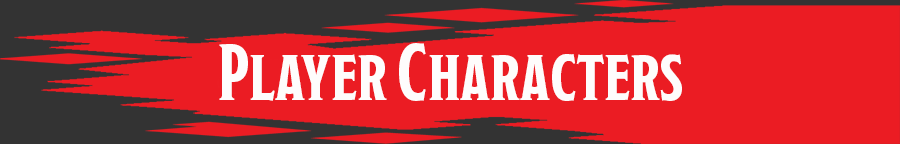
<style>
.page{position:relative;width:900px;height:144px;background:#eb1c23}
.page>*{position:absolute;margin:0}
.t1{font:80px "ModestoCondensed-Bold";color:#fefcfc}
</style>
<div class="page">
<p class="t1" style="left:219px;top:43px;width:463px;height:58px">Player Characters</p>
</div>
